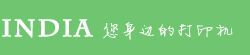
<style>
.page{position:relative;width:250px;height:55px;background:#70c570}
.page>*{position:absolute;margin:0}
.t1{font:23.5px "CharlemagneStd-Bold";letter-spacing:0.1em;color:#ffffff;font-weight:bold}
.t2{font:18px "FZJLJW--GB1-0";letter-spacing:0.1em;color:#ffffff;scale:1.1 1}
</style>
<div class="page">
<p class="t1" style="left:2px;top:19px;width:91px;height:19px">India</p>
<p class="t2" style="left:103px;top:22px;width:130px;height:18px">您身边的打印机</p>
</div>
